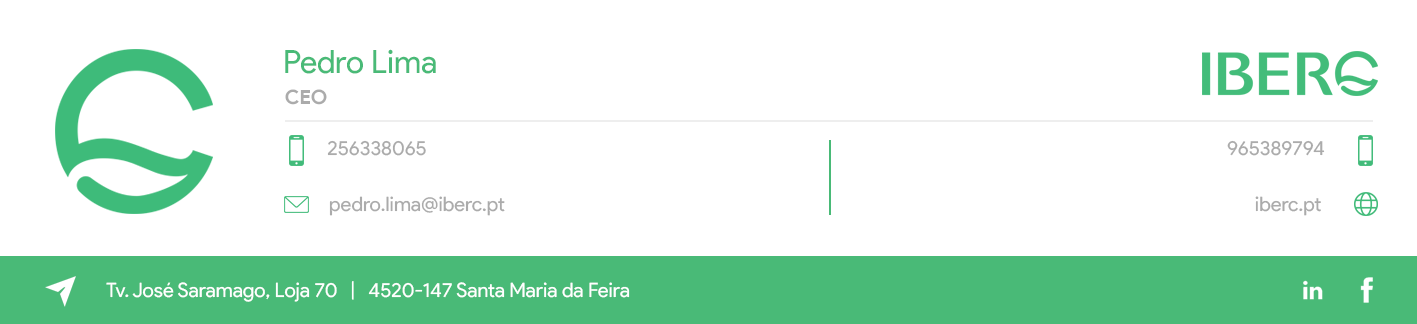
<style>
.page{position:relative;width:1417px;height:324px;background:#ffffff}
.page>*{position:absolute;margin:0}
.t1{font:32px "ProductSans-Regular";color:#49ba77}
.t2{font:20px "ProductSans-Bold";color:#ababab}
.t3{font:20px "ProductSans-Regular";color:#ababab}
.t4{font:20px "ProductSans-Regular";color:#ffffff}
</style>
<div class="page">
<p class="t1" style="left:285px;top:49px;width:151px;height:25px">Pedro Lima</p>
<p class="t2" style="left:285px;top:89px;width:42px;height:16px">CEO</p>
<p class="t3" style="left:327px;top:140px;width:99px;height:16px">256338065</p>
<p class="t3" style="left:1227px;top:140px;width:98px;height:16px">965389794</p>
<p class="t3" style="left:329px;top:196px;width:176px;height:20px">pedro.lima@iberc.pt</p>
<p class="t3" style="left:1255px;top:196px;width:66px;height:20px">iberc.pt</p>
<p class="t4" style="left:106px;top:281px;width:524px;height:21px">Tv. José Saramago, Loja 70   |   4520-147 Santa Maria da Feira</p>
</div>
